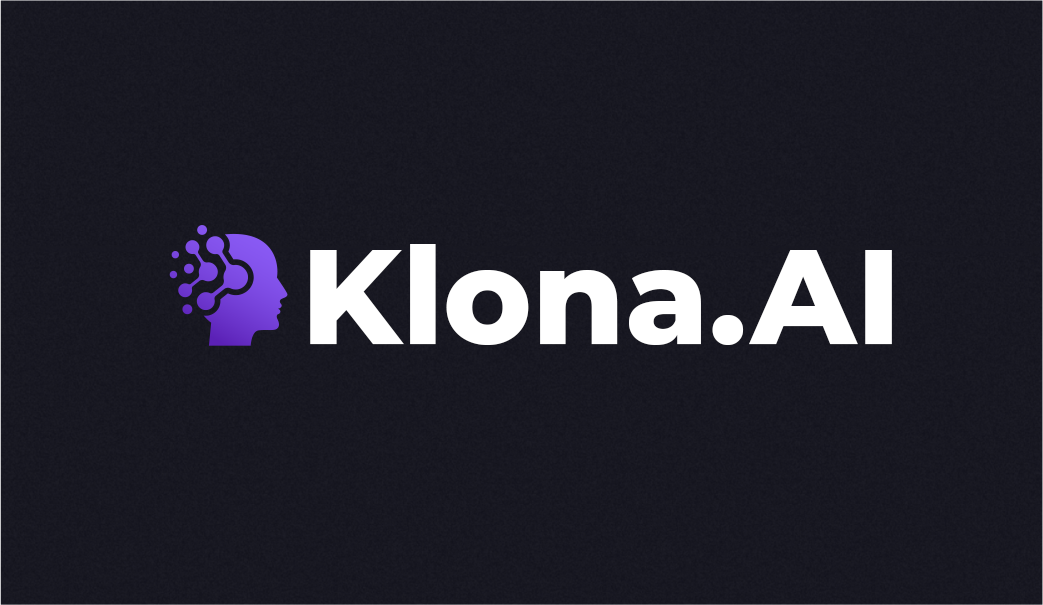
<style>
.page{position:relative;width:1043px;height:605px}
.page>*{position:absolute;margin:0}
.t1{font:133.4px "Montserrat-ExtraBold";color:#ffffff}
</style>
<div class="page">
<p class="t1" style="left:310px;top:244px;width:582px;height:101px">Klona.AI</p>
</div>
